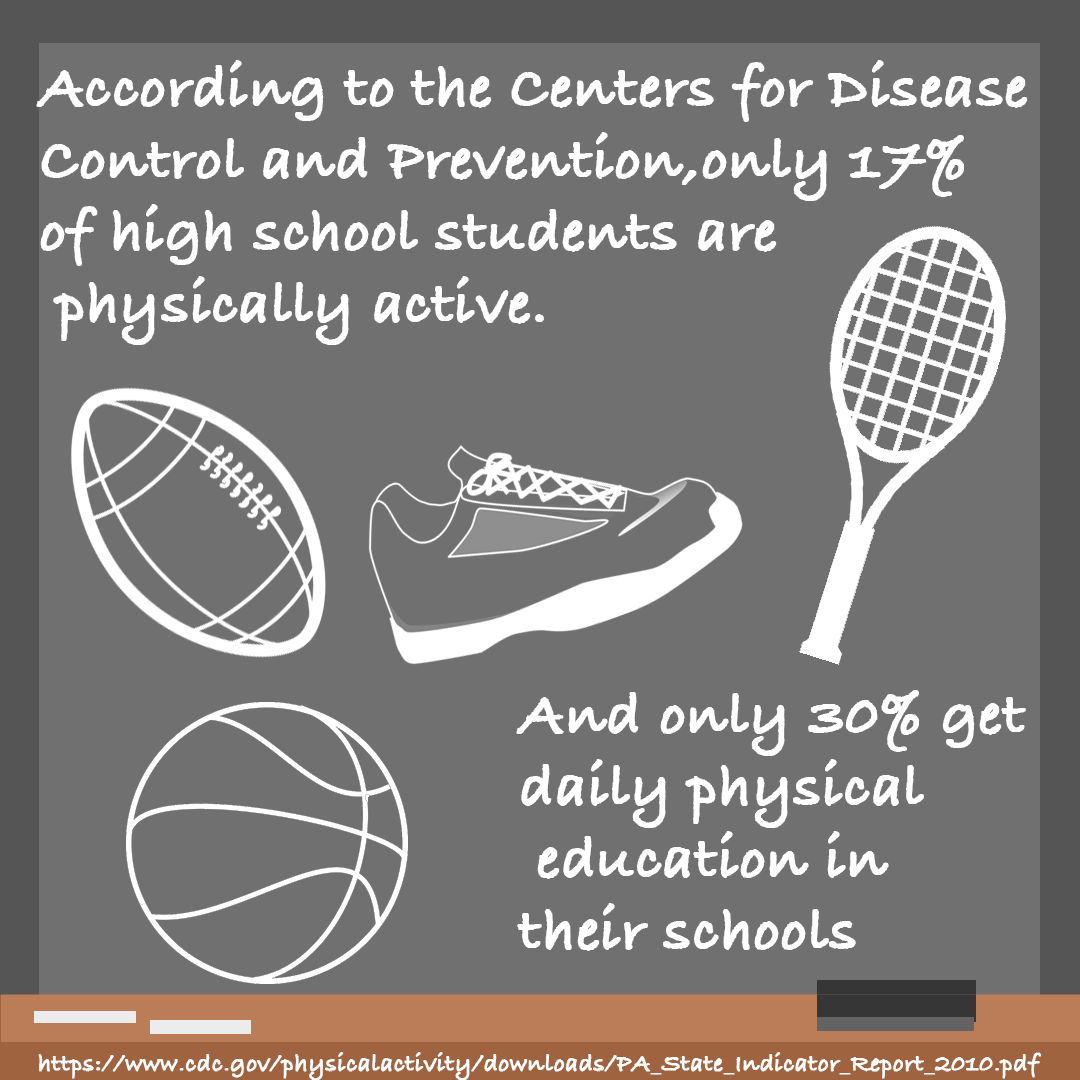
<style>
.page{position:relative;width:1080px;height:1080px;background:#707070}
.page>*{position:absolute;margin:0}
.t1{font:60px "BradleyHandITCTT-Bold";color:#ffffff;font-weight:bold}
.t2{font:25px "BradleyHandITCTT-Bold";color:#ffffff;font-weight:bold}
</style>
<div class="page">
<p class="t1" style="left:36px;top:60px;width:992px;height:285px">According to the Centers for Disease<br>Control and Prevention,only 17% <br>of high school students are<br> physically active.</p>
<p class="t1" style="left:516px;top:690px;width:510px;height:261px">And only 30% get<br>daily physical<br> education in <br>their schools</p>
<p class="t2" style="left:38px;top:1052px;width:1003px;height:29px">https://www.cdc.gov/physicalactivity/downloads/PA_State_Indicator_Report_2010.pdf</p>
</div>
